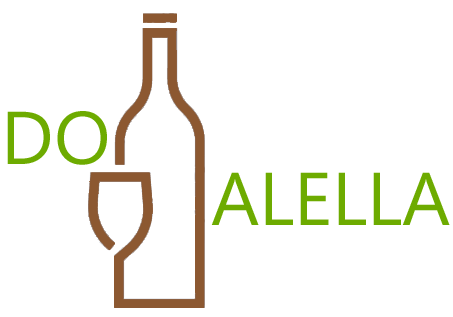
<style>
.page{position:relative;width:453px;height:317px;background:#ffffff}
.page>*{position:absolute;margin:0}
.t1{font:74.6px "Gadugi";color:#6dab00}
</style>
<div class="page">
<p class="t1" style="left:7px;top:111px;width:100px;height:54px">DO</p>
<p class="t1" style="left:211px;top:172px;width:239px;height:53px">ALELLA</p>
</div>
